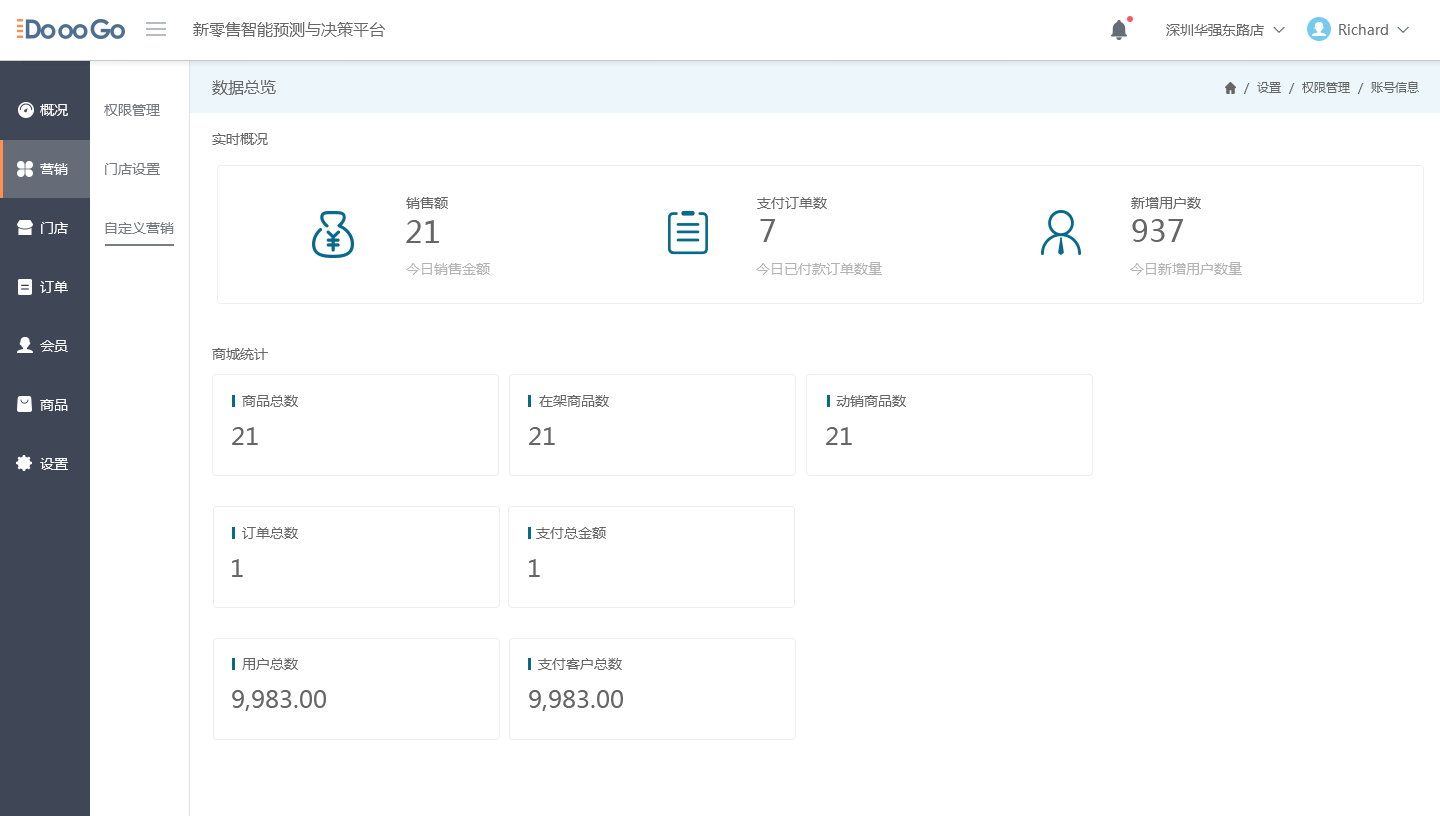
<style>
.page{position:relative;width:1440px;height:816px;background:#ffffff}
.page>*{position:absolute;margin:0}
.t1{font:16px "MicrosoftYaHeiUI";color:#666666}
.t2{font:14px "MicrosoftYaHeiUI";color:#666666}
.t3{font:14px "Marlett";color:#666666}
.t4{font:12px "MicrosoftYaHeiUI";color:#666666}
.t5{font:14px/59px "MicrosoftYaHeiUI";color:#ffffff}
.t6{font:14px/59px "MicrosoftYaHeiUI";color:#747982}
.t7{font:30px "MicrosoftYaHeiUI";color:#666666}
.t8{font:14px "MicrosoftYaHeiUI";color:#b3b3b3}
.t9{font:24px "MicrosoftYaHeiUI";color:#666666}
</style>
<div class="page">
<p class="t1" style="left:193px;top:22px;width:192px;height:15px">新零售智能预测与决策平台</p>
<p class="t2" style="left:1166px;top:24px;width:98px;height:12px">深圳华强东路店</p>
<p class="t2" style="left:1339px;top:24px;width:65px;height:11px">Richard <span class="t3">6</span></p>
<p class="t1" style="left:212px;top:80px;width:64px;height:15px">数据总览</p>
<p class="t4" style="left:1244px;top:81px;width:175px;height:13px">/  设置  /  权限管理  /  账号信息</p>
<p class="t5" style="left:40px;top:104px;width:28px;height:366px">概况<br>营销<br>门店<br>订单<br>会员<br>商品<br>设置</p>
<p class="t6" style="left:104px;top:104px;width:70px;height:130px">权限管理<br>门店设置<br>自定义营销</p>
<p class="t2" style="left:212px;top:133px;width:56px;height:12px">实时概况</p>
<p class="t2" style="left:406px;top:197px;width:42px;height:12px">销售额</p>
<p class="t2" style="left:757px;top:197px;width:70px;height:12px">支付订单数</p>
<p class="t2" style="left:1131px;top:197px;width:70px;height:12px">新增用户数</p>
<p class="t7" style="left:406px;top:220px;width:33px;height:23px">21</p>
<p class="t7" style="left:760px;top:219px;width:16px;height:23px">7</p>
<p class="t7" style="left:1132px;top:219px;width:52px;height:23px">937</p>
<p class="t8" style="left:406px;top:263px;width:84px;height:12px">今日销售金额</p>
<p class="t8" style="left:756px;top:262px;width:126px;height:13px">今日已付款订单数量</p>
<p class="t8" style="left:1130px;top:262px;width:112px;height:13px">今日新增用户数量</p>
<p class="t2" style="left:212px;top:348px;width:56px;height:12px">商城统计</p>
<p class="t2" style="left:242px;top:395px;width:56px;height:12px">商品总数</p>
<p class="t2" style="left:539px;top:395px;width:70px;height:12px">在架商品数</p>
<p class="t2" style="left:836px;top:395px;width:70px;height:12px">动销商品数</p>
<p class="t9" style="left:232px;top:427px;width:26px;height:18px">21</p>
<p class="t9" style="left:529px;top:427px;width:26px;height:18px">21</p>
<p class="t9" style="left:826px;top:427px;width:26px;height:18px">21</p>
<p class="t2" style="left:242px;top:527px;width:56px;height:12px">订单总数</p>
<p class="t2" style="left:536px;top:527px;width:70px;height:12px">支付总金额</p>
<p class="t9" style="left:232px;top:559px;width:11px;height:18px">1</p>
<p class="t9" style="left:529px;top:559px;width:11px;height:18px">1</p>
<p class="t2" style="left:242px;top:658px;width:56px;height:12px">用户总数</p>
<p class="t2" style="left:538px;top:658px;width:84px;height:12px">支付客户总数</p>
<p class="t9" style="left:232px;top:690px;width:94px;height:21px">9,983.00</p>
<p class="t9" style="left:529px;top:690px;width:94px;height:21px">9,983.00</p>
</div>
